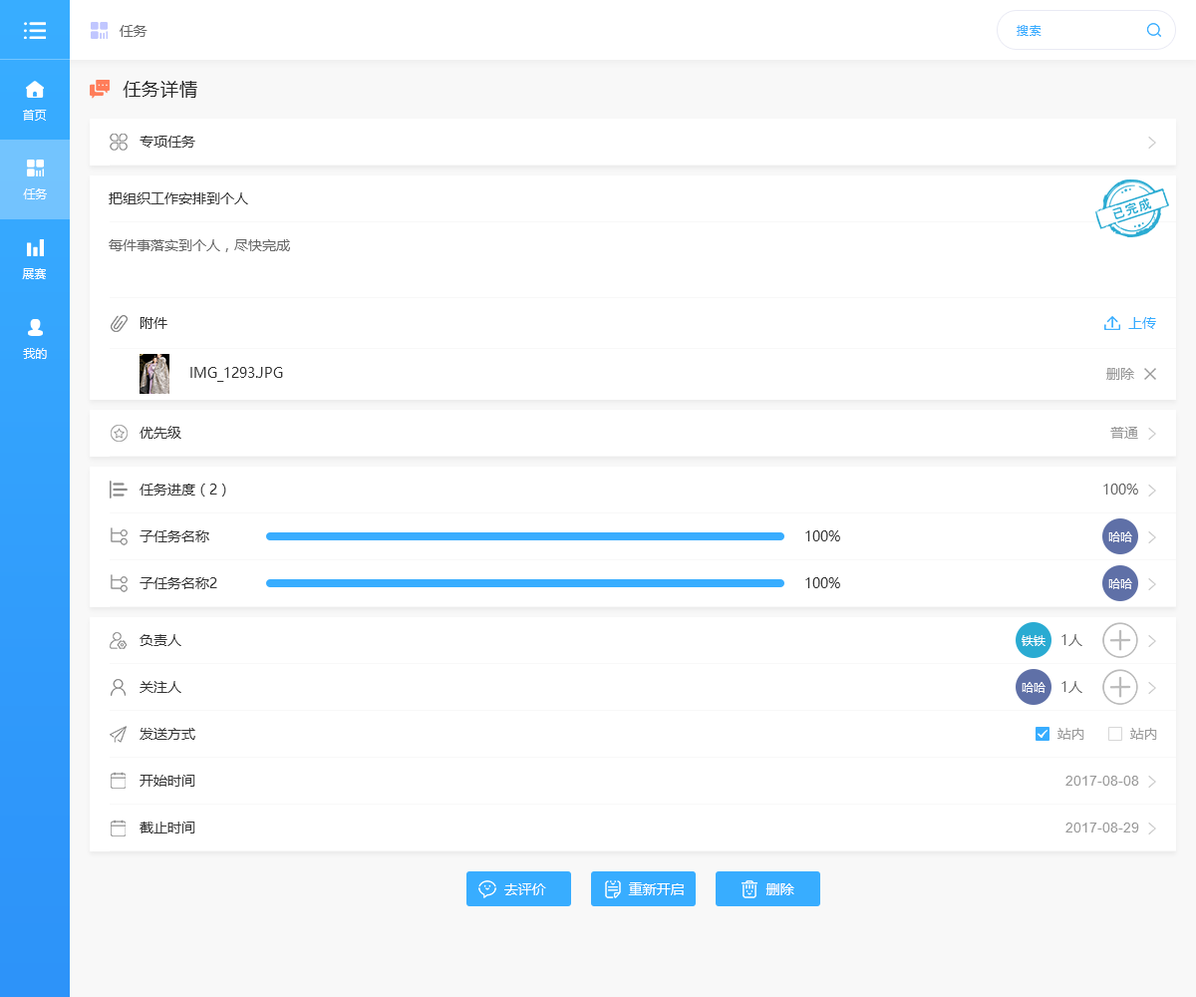
<style>
.page{position:relative;width:1196px;height:997px;background:#ffffff}
.page>*{position:absolute;margin:0}
.t1{font:14px "MicrosoftYaHei";color:#666666}
.t2{font:12px "MicrosoftYaHei";letter-spacing:0.05em;color:#38adff}
.t3{font:17.9px "MicrosoftYaHei";letter-spacing:0.05em;color:#222222}
.t4{font:12px "MicrosoftYaHei";color:#ffffff}
.t5{font:14px "MicrosoftYaHei";color:#333333}
.t6{font:14px "MicrosoftYaHei";color:#38adff}
.t7{font:14px "MicrosoftYaHei";color:#999999}
.t8{font:14px "ArialMT";color:#999999}
.t9{font:14px "MicrosoftYaHei";color:#ffffff}
</style>
<div class="page">
<p class="t1" style="left:120px;top:25px;width:28px;height:12px">任务</p>
<p class="t2" style="left:1017px;top:25px;width:25px;height:11px">搜索</p>
<p class="t3" style="left:123px;top:81px;width:74px;height:17px">任务详情</p>
<p class="t4" style="left:23px;top:110px;width:24px;height:11px">首页</p>
<p class="t5" style="left:140px;top:136px;width:55px;height:12px">专项任务</p>
<p class="t4" style="left:23px;top:188px;width:24px;height:11px">任务</p>
<p class="t5" style="left:109px;top:192px;width:139px;height:12px">把组织工作安排到个人</p>
<p class="t1" style="left:109px;top:239px;width:181px;height:13px">每件事落实到个人，尽快完成</p>
<p class="t4" style="left:22px;top:268px;width:24px;height:11px">展赛</p>
<p class="t5" style="left:140px;top:317px;width:27px;height:12px">附件</p>
<p class="t6" style="left:1128px;top:317px;width:28px;height:12px">上传</p>
<p class="t4" style="left:23px;top:348px;width:24px;height:11px">我的</p>
<p class="t5" style="left:190px;top:367px;width:93px;height:15px">IMG_1293.JPG</p>
<p class="t7" style="left:1106px;top:368px;width:28px;height:12px">删除</p>
<p class="t5" style="left:140px;top:426px;width:41px;height:13px">优先级</p>
<p class="t7" style="left:1110px;top:427px;width:28px;height:12px">普通</p>
<p class="t5" style="left:140px;top:483px;width:86px;height:13px">任务进度（2）</p>
<p class="t1" style="left:1104px;top:483px;width:34px;height:11px">100%</p>
<p class="t5" style="left:140px;top:530px;width:69px;height:12px">子任务名称</p>
<p class="t5" style="left:805px;top:530px;width:35px;height:11px">100%</p>
<p class="t4" style="left:1108px;top:531px;width:24px;height:11px">哈哈</p>
<p class="t5" style="left:140px;top:577px;width:77px;height:12px">子任务名称2</p>
<p class="t5" style="left:805px;top:577px;width:35px;height:11px">100%</p>
<p class="t4" style="left:1108px;top:578px;width:24px;height:11px">哈哈</p>
<p class="t5" style="left:140px;top:634px;width:41px;height:12px">负责人</p>
<p class="t4" style="left:1022px;top:635px;width:24px;height:11px">铁铁</p>
<p class="t1" style="left:1062px;top:634px;width:21px;height:12px">1人</p>
<p class="t5" style="left:140px;top:681px;width:41px;height:12px">关注人</p>
<p class="t4" style="left:1022px;top:682px;width:24px;height:11px">哈哈</p>
<p class="t1" style="left:1062px;top:681px;width:21px;height:12px">1人</p>
<p class="t5" style="left:140px;top:728px;width:55px;height:12px">发送方式</p>
<p class="t7" style="left:1058px;top:728px;width:27px;height:12px">站内</p>
<p class="t7" style="left:1130px;top:728px;width:27px;height:12px">站内</p>
<p class="t5" style="left:140px;top:775px;width:55px;height:12px">开始时间</p>
<p class="t8" style="left:1066px;top:776px;width:73px;height:10px">2017-08-08</p>
<p class="t5" style="left:140px;top:821px;width:55px;height:12px">截止时间</p>
<p class="t8" style="left:1066px;top:822px;width:73px;height:10px">2017-08-29</p>
<p class="t9" style="left:504px;top:883px;width:42px;height:12px">去评价</p>
<p class="t9" style="left:628px;top:882px;width:56px;height:13px">重新开启</p>
<p class="t9" style="left:766px;top:883px;width:28px;height:12px">删除</p>
</div>
